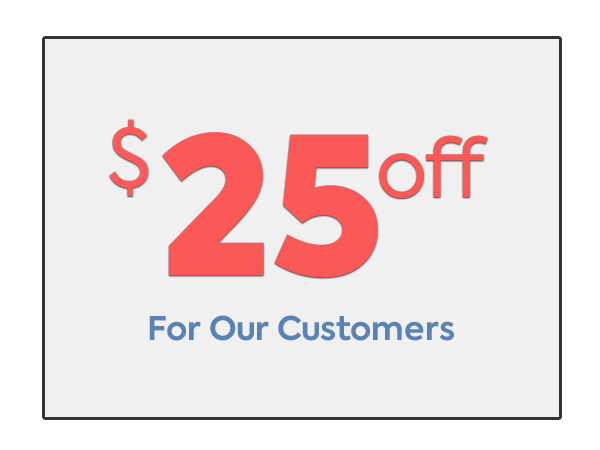
<style>
.page{position:relative;width:600px;height:450px;background:#f0f0f0}
.page>*{position:absolute;margin:0}
.t1{font:80px "Axiforma-Book";color:#fb5858}
.t2{font:84.6px "Axiforma-Regular";color:#bb0000}
.t3{font:189.5px "Axiforma-Black";color:#fb5858}
.t4{font:32.4px "Axiforma-Bold";color:#5a82b5}
</style>
<div class="page">
<p class="t1" style="left:109px;top:119px;width:40px;height:77px">$<span class="t2">$</span></p>
<p class="t3" style="left:162px;top:132px;width:216px;height:146px">25</p>
<p class="t1" style="left:379px;top:135px;width:109px;height:63px">off</p>
<p class="t4" style="left:149px;top:315px;width:305px;height:26px">For Our Customers</p>
</div>
